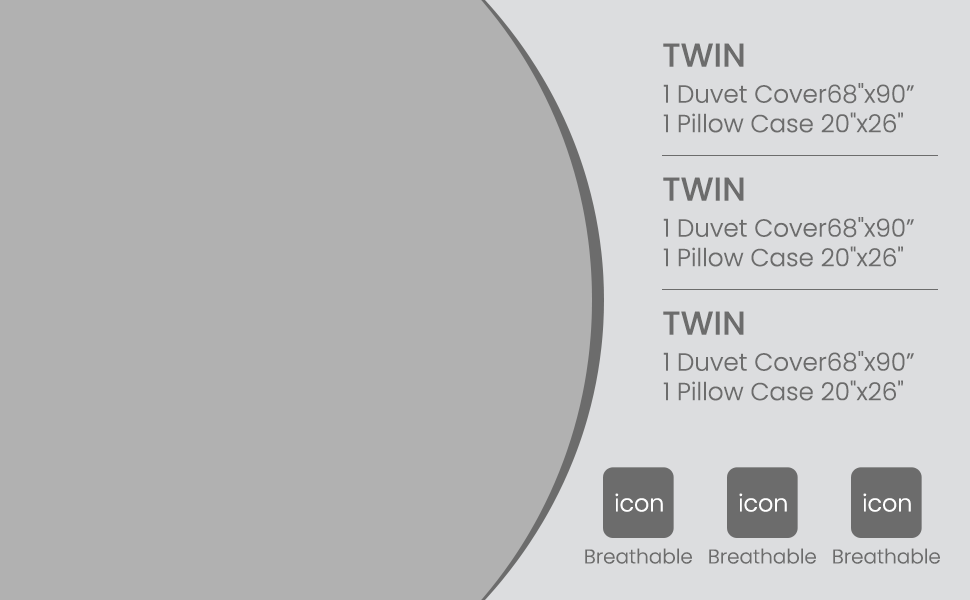
<style>
.page{position:relative;width:970px;height:600px;background:#b1b1b1}
.page>*{position:absolute;margin:0}
.t1{font:32.8px "Poppins-Medium";color:#6c6c6c;text-transform:uppercase}
.t2{font:24.6px "Poppins-Light";color:#6c6c6c}
.t3{font:23.7px "Poppins-Light";color:#ffffff}
.t4{font:20px "Poppins-Light";color:#6c6c6c}
</style>
<div class="page">
<p class="t1" style="left:663px;top:43px;width:81px;height:24px">TWIN</p>
<p class="t2" style="left:663px;top:83px;width:251px;height:50px">1 Duvet Cover68"x90”<br>1 Pillow Case 20"x26"</p>
<p class="t1" style="left:663px;top:177px;width:81px;height:24px">TWIN</p>
<p class="t2" style="left:663px;top:217px;width:251px;height:50px">1 Duvet Cover68"x90”<br>1 Pillow Case 20"x26"</p>
<p class="t1" style="left:663px;top:311px;width:81px;height:24px">TWIN</p>
<p class="t2" style="left:663px;top:351px;width:251px;height:50px">1 Duvet Cover68"x90”<br>1 Pillow Case 20"x26"</p>
<p class="t3" style="left:615px;top:493px;width:48px;height:19px">icon</p>
<p class="t3" style="left:739px;top:493px;width:48px;height:19px">icon</p>
<p class="t3" style="left:863px;top:493px;width:48px;height:19px">icon</p>
<p class="t4" style="left:585px;top:548px;width:107px;height:16px">Breathable</p>
<p class="t4" style="left:709px;top:548px;width:107px;height:16px">Breathable</p>
<p class="t4" style="left:833px;top:548px;width:107px;height:16px">Breathable</p>
</div>
